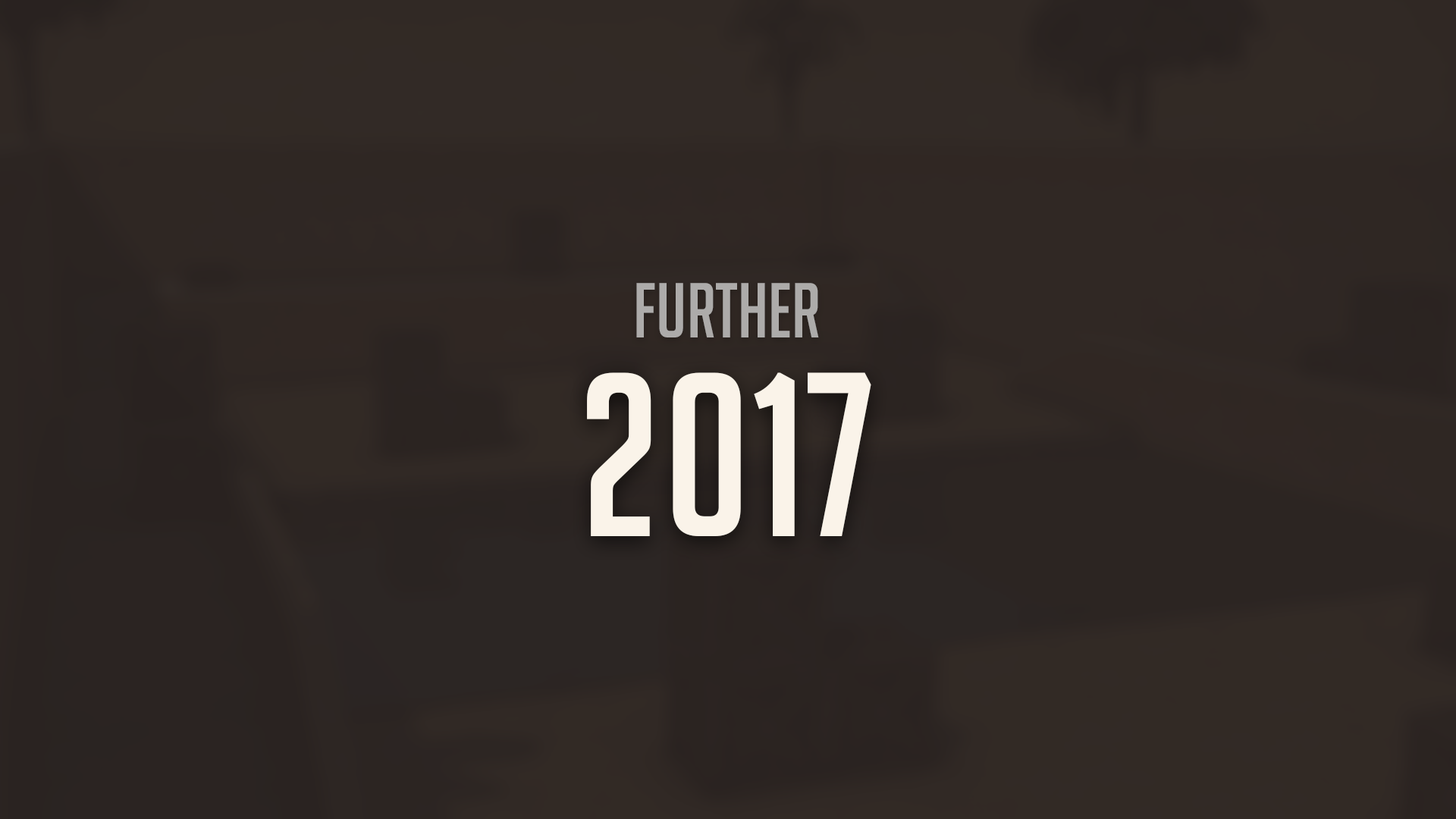
<style>
.page{position:relative;width:1456px;height:819px}
.page>*{position:absolute;margin:0}
.t1{font:75.8px "BigNoodleTitlingRUSbyDaymarius";color:#adabaa}
.t2{font:227.5px "BigNoodleTitlingRUSbyDaymarius";color:#faf3e9}
</style>
<div class="page">
<p class="t1" style="left:636px;top:283px;width:183px;height:54px">FURTHER</p>
<p class="t2" style="left:587px;top:372px;width:284px;height:164px">2017</p>
</div>
